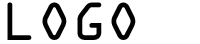
<style>
.page{position:relative;width:200px;height:44px;background:#ffffff}
.page>*{position:absolute;margin:0}
.t1{font:48.3px "OCRAStd";color:#010101}
</style>
<div class="page">
<p class="t1" style="left:7px;top:2px;width:129px;height:38px">LOGO</p>
</div>
